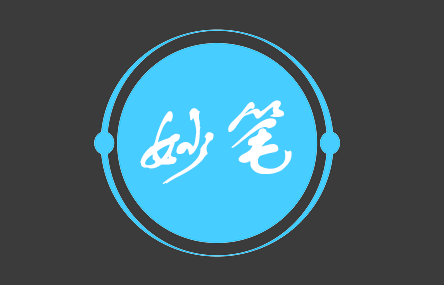
<style>
.page{position:relative;width:444px;height:285px;background:#3b3b3b}
.page>*{position:absolute;margin:0}
.t1{font:96px "FZSTK--GBK1-0";letter-spacing:0.05em;color:#ffffff;font-weight:bold;scale:0.87 1}
</style>
<div class="page">
<p class="t1" style="left:140px;top:100px;width:152px;height:84px">妙笔</p>
</div>
